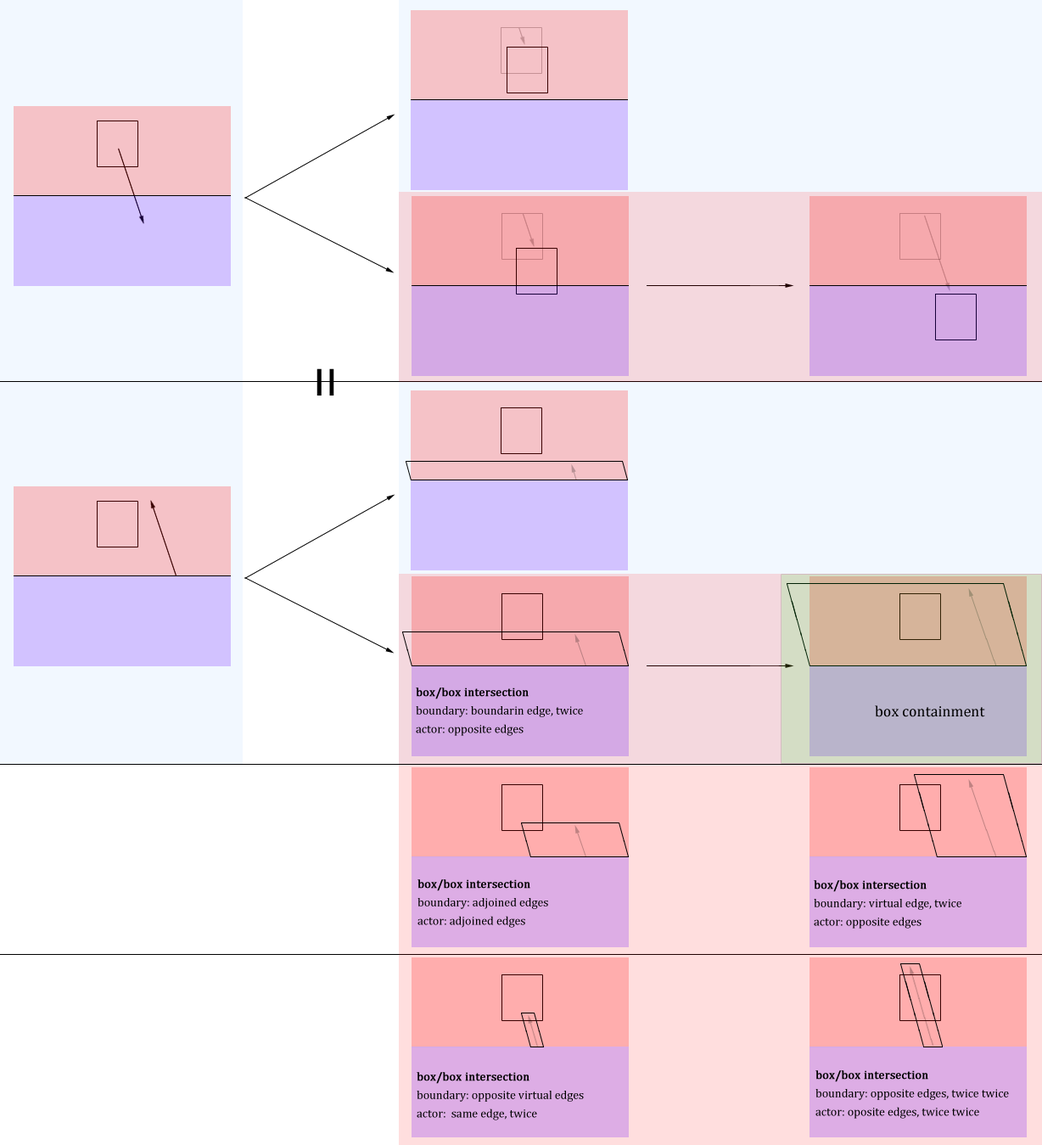
<style>
.page{position:relative;width:1042px;height:1145px;background:#f2f8ff}
.page>*{position:absolute;margin:0}
.t1{font:61.1px "Cambria";color:#000000}
.t2{font:11.9px/18.5px "Cambria";color:#000000}
.t3{font:11.9px/18.5px "Cambria";color:#000000;font-weight:bold}
.t4{font:15.3px "Cambria";color:#000000}
</style>
<div class="page">
<p class="t1" style="left:316px;top:368px;width:18px;height:27px;rotate:90deg">=</p>
<p class="t2" style="left:416px;top:687px;width:167px;height:49px"><span class="t3">box/box intersection<br></span>boundary: boundarin edge, twice<br>actor: opposite edges</p>
<p class="t4" style="left:875px;top:705px;width:110px;height:12px">box containment</p>
<p class="t2" style="left:417px;top:879px;width:131px;height:48px"><span class="t3">box/box intersection<br></span>boundary: adjoined edges<br>actor: adjoined edges</p>
<p class="t2" style="left:814px;top:880px;width:147px;height:48px"><span class="t3">box/box intersection<br></span>boundary: virtual edge, twice<br>actor: opposite edges</p>
<p class="t2" style="left:417px;top:1072px;width:167px;height:48px"><span class="t3">box/box intersection<br></span>boundary: opposite virtual edges<br>actor:  same edge, twice</p>
<p class="t2" style="left:815px;top:1070px;width:194px;height:48px"><span class="t3">box/box intersection<br></span>boundary: opposite edges, twice twice<br>actor: oposite edges, twice twice</p>
</div>
